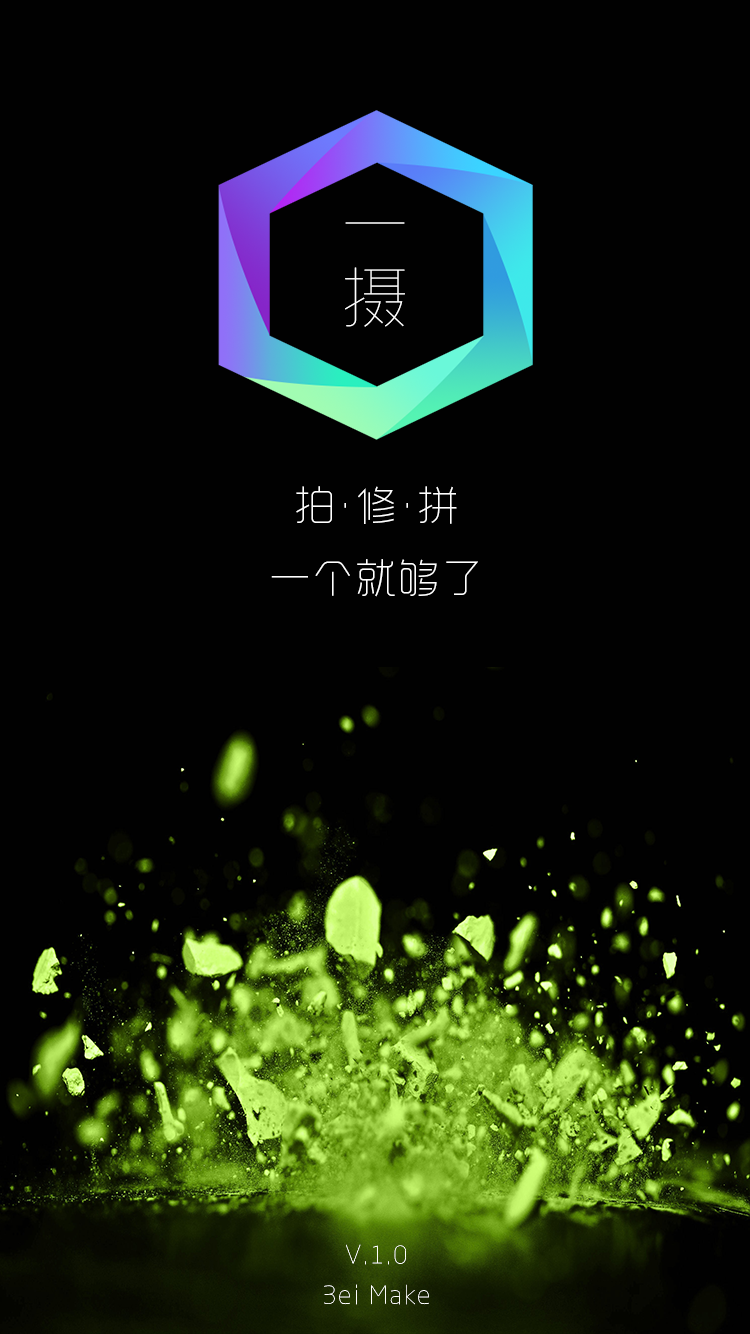
<style>
.page{position:relative;width:750px;height:1334px;background:#010101}
.page>*{position:absolute;margin:0}
.t1{font:64px/73.3px "MFYueHei_Noncommercial-UltLight";letter-spacing:0.075em;color:#ffffff}
.t2{font:40px/73.3px "RTWSYueGoTrial-ExLight";letter-spacing:0.075em;color:#ffffff}
.t3{font:26.7px/40px "MFYueHei_Noncommercial-UltLight";letter-spacing:0.075em;color:#ffffff}
</style>
<div class="page">
<p class="t1" style="left:345px;top:222px;width:60px;height:105px;text-align:center">一<br>摄</p>
<p class="t2" style="left:271px;top:486px;width:207px;height:111px;text-align:center">拍·修·拼<br>一个就够了</p>
<p class="t3" style="left:324px;top:1244px;width:105px;height:61px;text-align:center">V.1.0<br>3ei Make</p>
</div>
